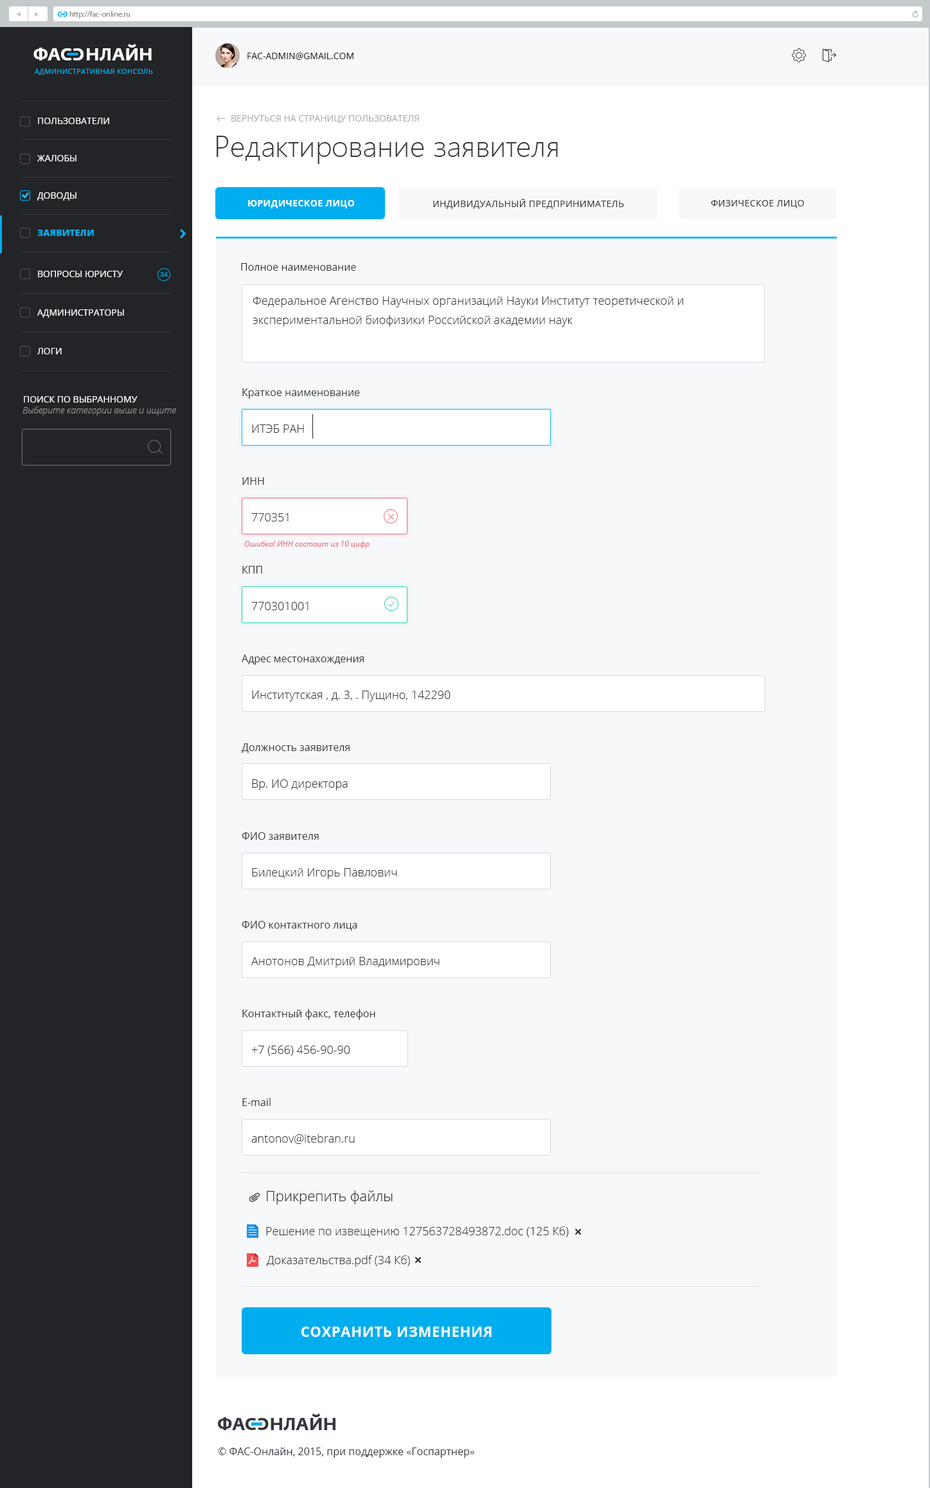
<style>
.page{position:relative;width:930px;height:1488px;background:#f7f8fa}
.page>*{position:absolute;margin:0}
.t1{font:6.4px "FedraSansPro-Bold";color:#00aeef;text-transform:uppercase}
.t2{font:7.7px "MyriadPro-Regular";color:#8d8d8d}
.t3{font:17.4px "FedraSansPro-Bold";color:#ffffff;text-transform:uppercase}
.t4{font:9px "OpenSans";color:#222427;text-transform:uppercase}
.t5{font:7.1px "OpenSans";letter-spacing:0.03em;color:#00aeef;text-transform:uppercase}
.t6{font:9px "OpenSans";color:#ffffff;text-transform:uppercase}
.t7{font:9px "OpenSans";color:#adaeb0;text-transform:uppercase}
.t8{font:29.6px "SegoeUI-Light";color:#34383e}
.t9{font:9px "OpenSans-Bold";letter-spacing:0.03em;color:#ffffff;text-transform:uppercase}
.t10{font:9px "OpenSans";letter-spacing:0.03em;color:#34383e;text-transform:uppercase}
.t11{font:9px "OpenSans-Extrabold";color:#00aeef;text-transform:uppercase}
.t12{font:10.3px "OpenSans";color:#34383e}
.t13{font:6.4px "OpenSans";color:#00aeef}
.t14{font:11.6px/19.3px "OpenSans-Light";color:#34383e}
.t15{font:10.3px/51.4px "OpenSans";color:#34383e}
.t16{font:9px "OpenSansLight-Italic";color:#959596}
.t17{font:11.6px/51.4px "OpenSans-Light";color:#34383e}
.t18{font:7.7px "OpenSans-Italic";color:#ed6c7e}
.t19{font:14.1px "OpenSans-Light";color:#222427}
.t20{font:11.6px "OpenSans-Light";color:#34383e}
.t21{font:14.1px "OpenSans-Bold";letter-spacing:0.03em;color:#fefefe;text-transform:uppercase}
.t22{font:17.4px "FedraSansPro-Bold";color:#34383e;text-transform:uppercase}
</style>
<div class="page">
<p class="t1" style="left:58px;top:12px;width:4px;height:5px">c</p>
<p class="t1" style="left:63px;top:12px;width:5px;height:5px;rotate:180deg">c</p>
<p class="t2" style="left:69px;top:11px;width:61px;height:8px">http://fac-online.ru</p>
<p class="t3" style="left:33px;top:44px;width:119px;height:17px">ФАc   НЛАЙН</p>
<p class="t3" style="left:73px;top:48px;width:11px;height:12px;rotate:180deg">c</p>
<p class="t4" style="left:248px;top:53px;width:106px;height:7px">FAC-Admin@gmail.com</p>
<p class="t5" style="left:35px;top:69px;width:118px;height:6px">Административная консоль</p>
<p class="t6" style="left:38px;top:118px;width:71px;height:6px">Пользователи</p>
<p class="t7" style="left:231px;top:115px;width:188px;height:8px">Вернуться на страницу пользователя</p>
<p class="t8" style="left:217px;top:136px;width:341px;height:28px">Редактирование заявителя</p>
<p class="t6" style="left:37px;top:155px;width:39px;height:6px">жалобы</p>
<p class="t6" style="left:37px;top:192px;width:39px;height:9px">Доводы</p>
<p class="t9" style="left:248px;top:200px;width:107px;height:8px">юридическое лицо</p>
<p class="t10" style="left:433px;top:199px;width:191px;height:10px">индивидуальный предприниматель</p>
<p class="t10" style="left:711px;top:200px;width:93px;height:8px">физическое лицо</p>
<p class="t11" style="left:37px;top:230px;width:57px;height:6px">ЗАявители</p>
<p class="t12" style="left:241px;top:263px;width:115px;height:8px">Полное наименование</p>
<p class="t6" style="left:38px;top:271px;width:85px;height:6px">вопросы юристу</p>
<p class="t13" style="left:160px;top:272px;width:8px;height:4px">34</p>
<p class="t14" style="left:253px;top:296px;width:430px;height:31px">Федеральное Агенство Научных организаций Науки Институт теоретической и экспериментальной биофизики Российской академии наук</p>
<p class="t6" style="left:37px;top:309px;width:87px;height:9px">Администраторы</p>
<p class="t6" style="left:37px;top:348px;width:25px;height:6px">логи</p>
<p class="t15" style="left:242px;top:388px;width:133px;height:718px">Краткое наименование<br>ИНН<br>КПП<br>Адрес местонахождения<br>Должность заявителя<br>ФИО заявителя<br>ФИО контактного лица<br>Контактный факс, телефон<br>E-mail</p>
<p class="t6" style="left:24px;top:396px;width:114px;height:6px">Поиск по выбранному</p>
<p class="t16" style="left:22px;top:406px;width:154px;height:9px">Выберите категории выше и ищите</p>
<p class="t17" style="left:251px;top:424px;width:200px;height:720px">ИТЭБ РАН <br>770351<br>770301001<br>Институтская , д. 3, . Пущино, 142290<br>Вр. ИО директора <br>Билецкий Игорь Павлович<br>Анотонов Дмитрий Владимирович<br>+7 (566) 456-90-90<br>antonov@itebran.ru</p>
<p class="t18" style="left:244px;top:541px;width:126px;height:7px">Ошибка! ИНН состоит из 10 цифр</p>
<p class="t19" style="left:267px;top:1190px;width:126px;height:14px">Прикрепить файлы</p>
<p class="t20" style="left:266px;top:1226px;width:303px;height:11px">Решение по извещению 127563728493872.doc (125 Кб)</p>
<p class="t20" style="left:267px;top:1255px;width:143px;height:11px">Доказательства.pdf (34 Кб)</p>
<p class="t21" style="left:302px;top:1326px;width:190px;height:10px">сохранить изменения</p>
<p class="t22" style="left:218px;top:1413px;width:118px;height:17px">ФАc   НЛАЙН</p>
<p class="t22" style="left:258px;top:1418px;width:11px;height:12px;rotate:180deg">c</p>
<p class="t12" style="left:218px;top:1447px;width:256px;height:10px">© ФАС-Онлайн, 2015, при поддержке «Госпартнер»</p>
</div>
